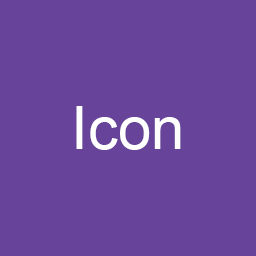
<style>
.page{position:relative;width:256px;height:256px;background:#67439a}
.page>*{position:absolute;margin:0}
.t1{font:60px "ArialMT";color:#ffffff}
</style>
<div class="page">
<p class="t1" style="left:76px;top:106px;width:105px;height:44px">Icon</p>
</div>
